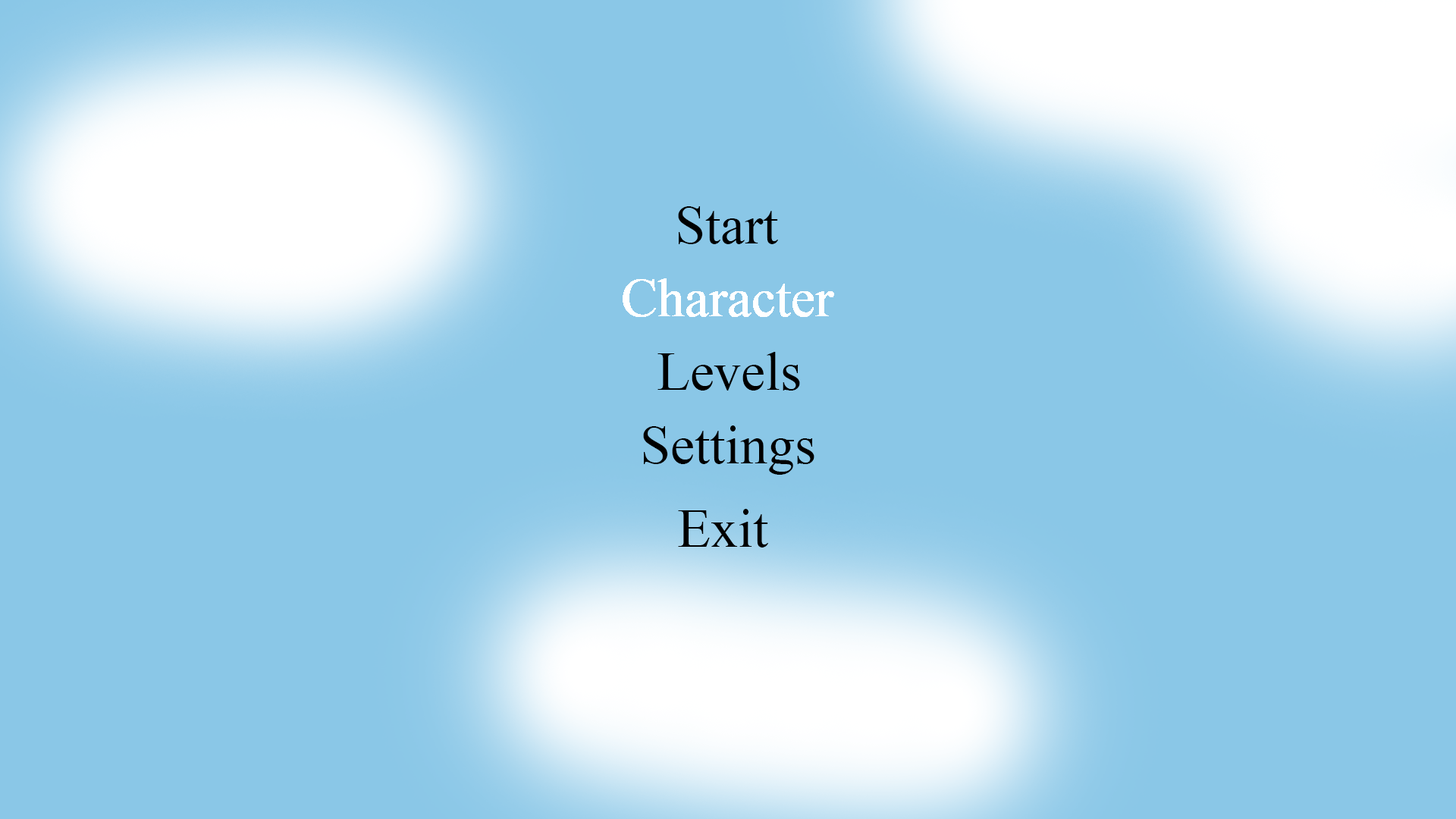
<style>
.page{position:relative;width:1456px;height:819px;background:#8ac7e7}
.page>*{position:absolute;margin:0}
.t1{font:54.6px "TimesNewRomanPSMT";color:#000000}
</style>
<div class="page">
<p class="t1" style="left:678px;top:206px;width:100px;height:38px">Start</p>
<p class="t1" style="left:657px;top:352px;width:143px;height:39px">Levels</p>
<p class="t1" style="left:643px;top:425px;width:171px;height:50px">Settings</p>
<p class="t1" style="left:678px;top:509px;width:90px;height:39px">Exit</p>
</div>
